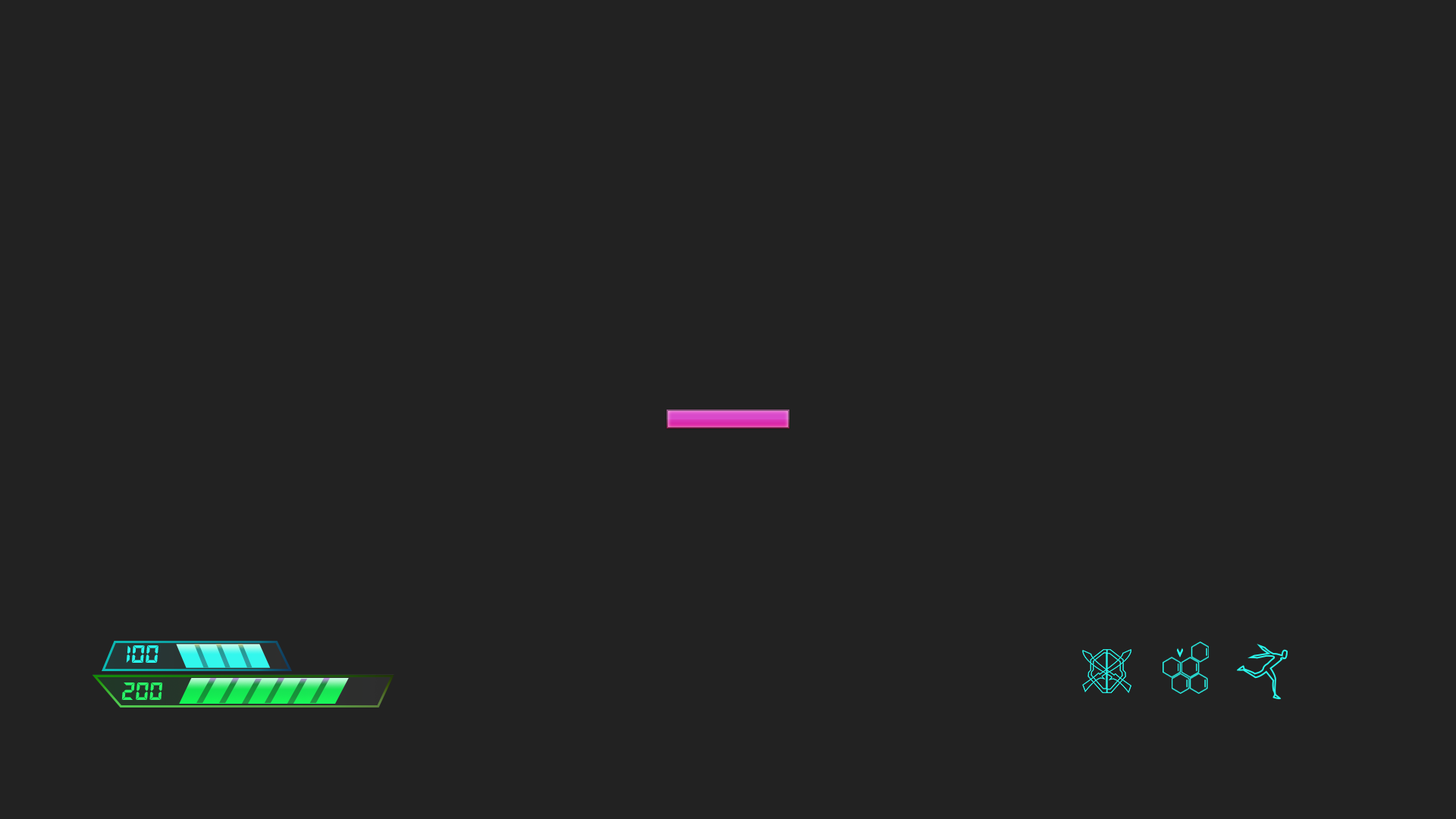
<style>
.page{position:relative;width:1456px;height:819px;background:#222222}
.page>*{position:absolute;margin:0}
.t1{font:27.3px "LetsgoDigital-Regular";color:#29f7ec}
.t2{font:27.3px "LetsgoDigital-Regular";color:#29f768}
</style>
<div class="page">
<p class="t1" style="left:126px;top:645px;width:32px;height:18px">100</p>
<p class="t2" style="left:121px;top:682px;width:41px;height:18px">200</p>
</div>
